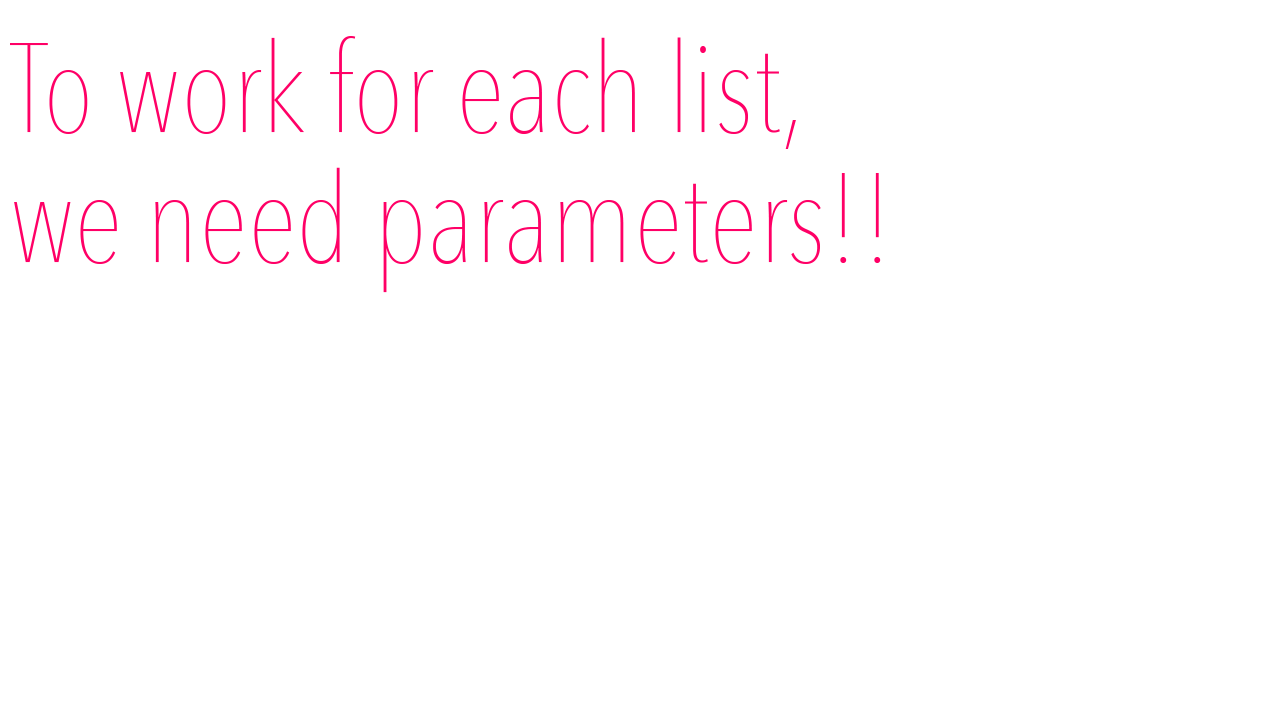
<style>
.page{position:relative;width:1280px;height:720px;background:#ffffff}
.page>*{position:absolute;margin:0}
.t1{font:125px "AvenirNextCondensed-UltraLight";color:#ff0066}
</style>
<div class="page">
<p class="t1" style="left:10px;top:36px;width:871px;height:257px">To work for each list,<br>we need parameters!!</p>
</div>
